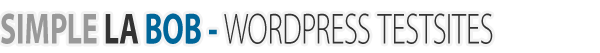
<style>
.page{position:relative;width:600px;height:53px;background:#ffffff}
.page>*{position:absolute;margin:0}
.t1{font:43.8px "MyriadPro-Light";color:#333333;scale:0.68 1}
.t2{font:43.8px "MyriadPro-Bold";color:#999999;scale:0.68 1}
.t3{font:43.8px "MyriadPro-Bold";color:#333333;scale:0.68 1}
.t4{font:43.8px "MyriadPro-Bold";color:#006699;scale:0.68 1}
</style>
<div class="page">
<p class="t1" style="left:1px;top:13px;width:492px;height:31px"><span class="t2">SIMPLE </span><span class="t3">LA </span><span class="t4">BOB - </span>WORDPRESS TESTSITES</p>
</div>
